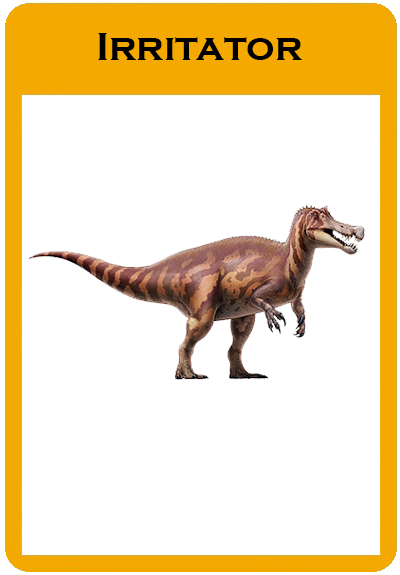
<style>
.page{position:relative;width:400px;height:575px;background:#ffffff}
.page>*{position:absolute;margin:0}
.t1{font:40px "CopperplateGothic-Bold";color:#000000}
</style>
<div class="page">
<p class="t1" style="left:98px;top:33px;width:204px;height:27px">Irritator</p>
</div>
